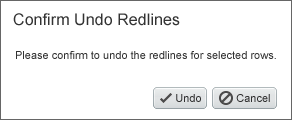
<style>
.page{position:relative;width:292px;height:121px;background:#ffffff}
.page>*{position:absolute;margin:0}
.t1{font:16px "ArialMT";letter-spacing:0.005em;color:#333333}
.t2{font:11px "ArialMT";color:#333333}
.t3{font:11px "ArialMT";color:#303030}
</style>
<div class="page">
<p class="t1" style="left:13px;top:13px;width:167px;height:13px">Confirm Undo Redlines</p>
<p class="t2" style="left:16px;top:51px;width:260px;height:8px">Please confirm to undo the redlines for selected rows.</p>
<p class="t3" style="left:176px;top:94px;width:25px;height:8px">Undo</p>
<p class="t3" style="left:236px;top:94px;width:34px;height:8px">Cancel</p>
</div>
